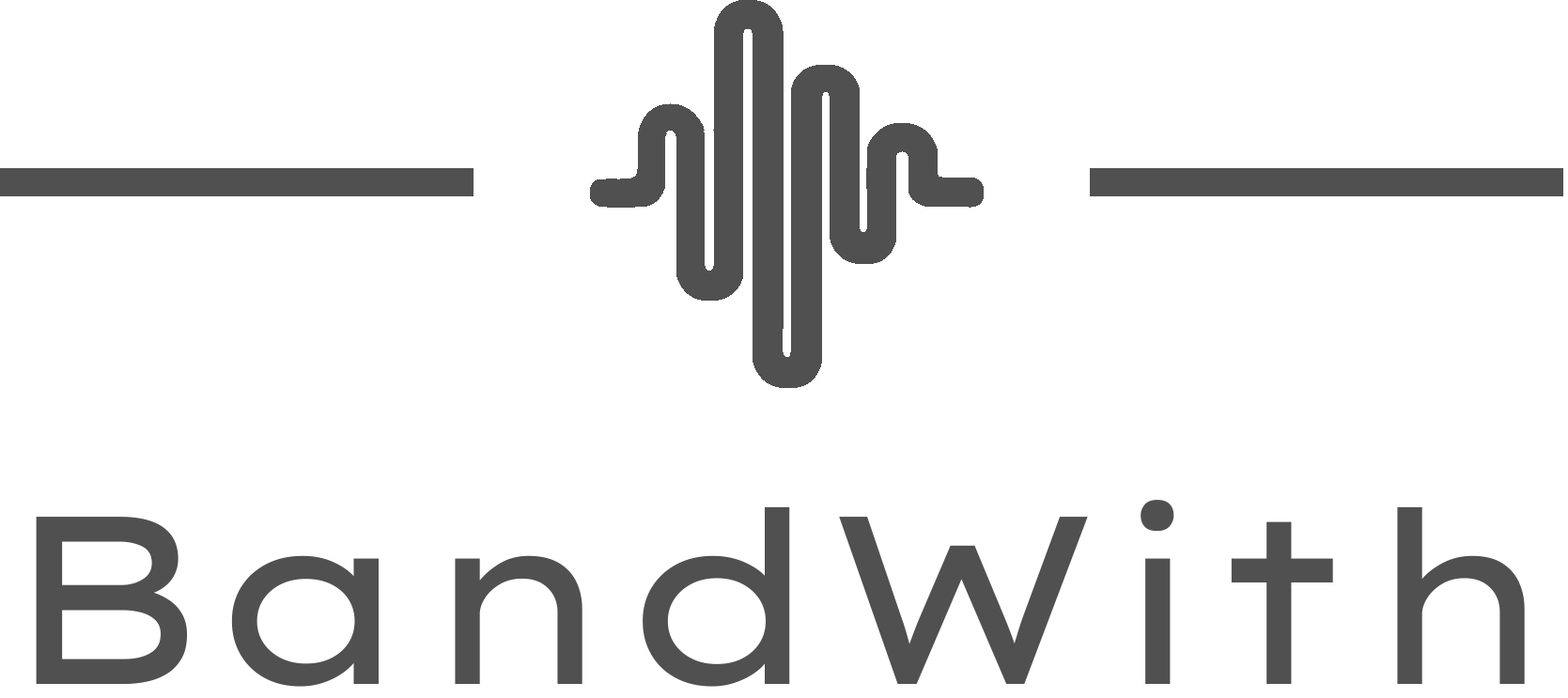
<style>
.page{position:relative;width:1568px;height:698px;background:#ffffff}
.page>*{position:absolute;margin:0}
.t1{font:238.8px "LexendMega-Regular";color:#505050}
</style>
<div class="page">
<p class="t1" style="left:36px;top:500px;width:1489px;height:187px">BandWith</p>
</div>
